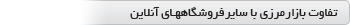
<style>
.page{position:relative;width:350px;height:25px;background:#ffffff}
.page>*{position:absolute;margin:0}
.t1{font:13.2px "BYekan";color:#231f20}
</style>
<div class="page">
<p class="t1" style="left:130px;top:7px;width:208px;height:12px">تفاوت بازار مرزی با سایر فروشگاههـای آنلاین</p>
</div>
